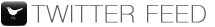
<style>
.page{position:relative;width:215px;height:27px;background:#ffffff}
.page>*{position:absolute;margin:0}
.t1{font:24px "HelveticaNeue-UltraLight";letter-spacing:0.075em;color:#5f5f5f;font-weight:bold}
</style>
<div class="page">
<p class="t1" style="left:31px;top:5px;width:175px;height:18px">TWITTER FEED</p>
</div>
